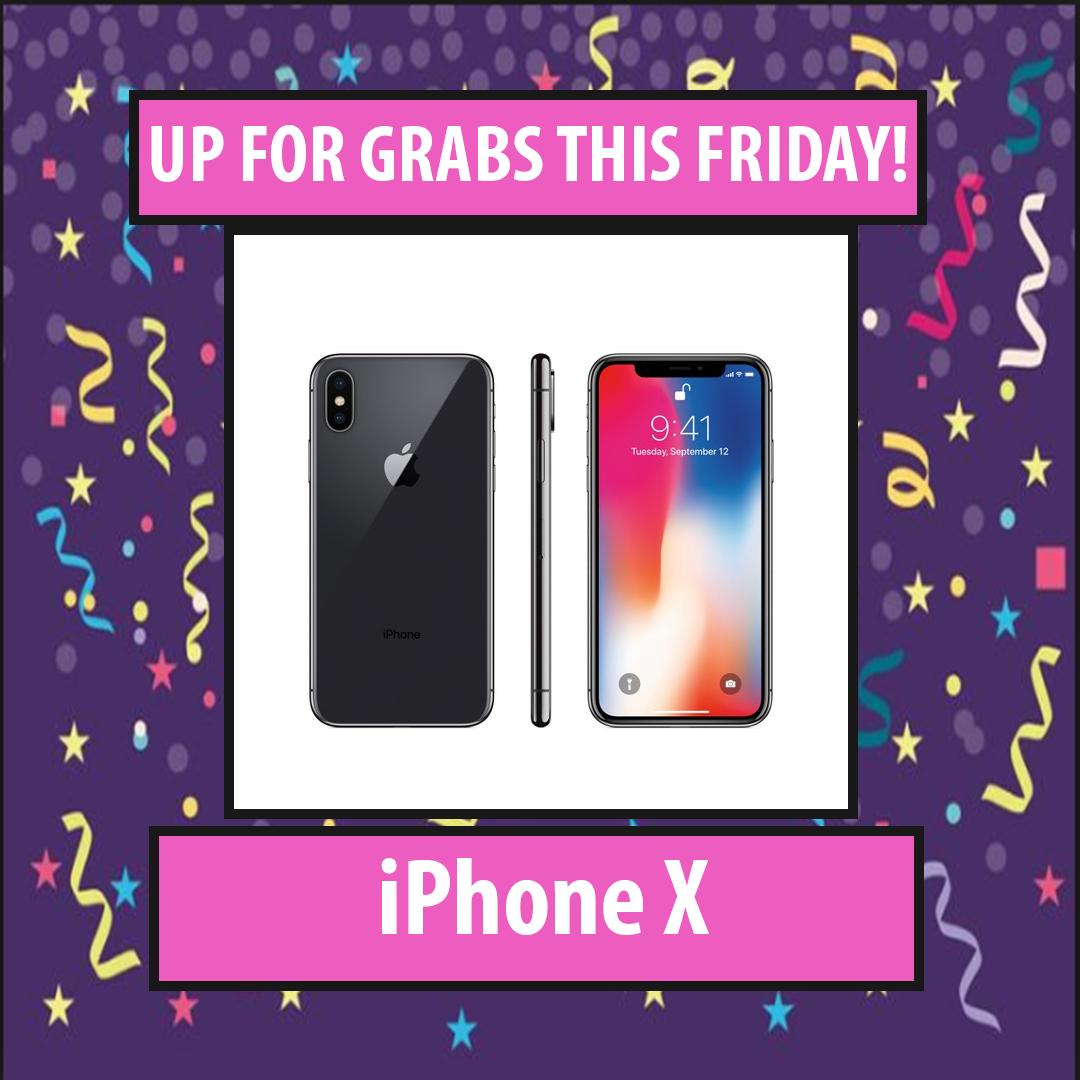
<style>
.page{position:relative;width:1080px;height:1080px}
.page>*{position:absolute;margin:0}
.t1{font:81px "MyriadPro-BoldCond";color:#ffffff}
.t2{font:110px "MyriadPro-BoldCond";color:#ffffff}
</style>
<div class="page">
<p class="t1" style="left:151px;top:125px;width:755px;height:57px">UP FOR GRABS THIS FRIDAY!</p>
<p class="t2" style="left:381px;top:858px;width:328px;height:77px">iPhone X</p>
</div>
